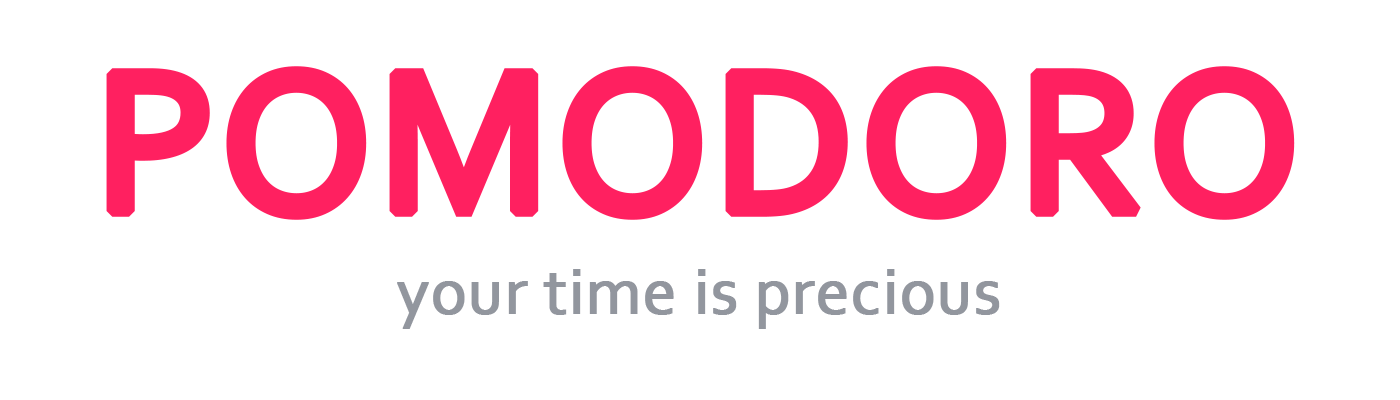
<style>
.page{position:relative;width:1400px;height:400px;background:#ffffff}
.page>*{position:absolute;margin:0}
.t1{font:209.3px "Corbel";color:#ff2060;font-weight:bold}
.t2{font:66.8px "Corbel";color:#92969d;font-weight:bold}
</style>
<div class="page">
<p class="t1" style="left:106px;top:66px;width:1189px;height:154px">POMODORO</p>
<p class="t2" style="left:397px;top:269px;width:603px;height:60px">your time is precious</p>
</div>
